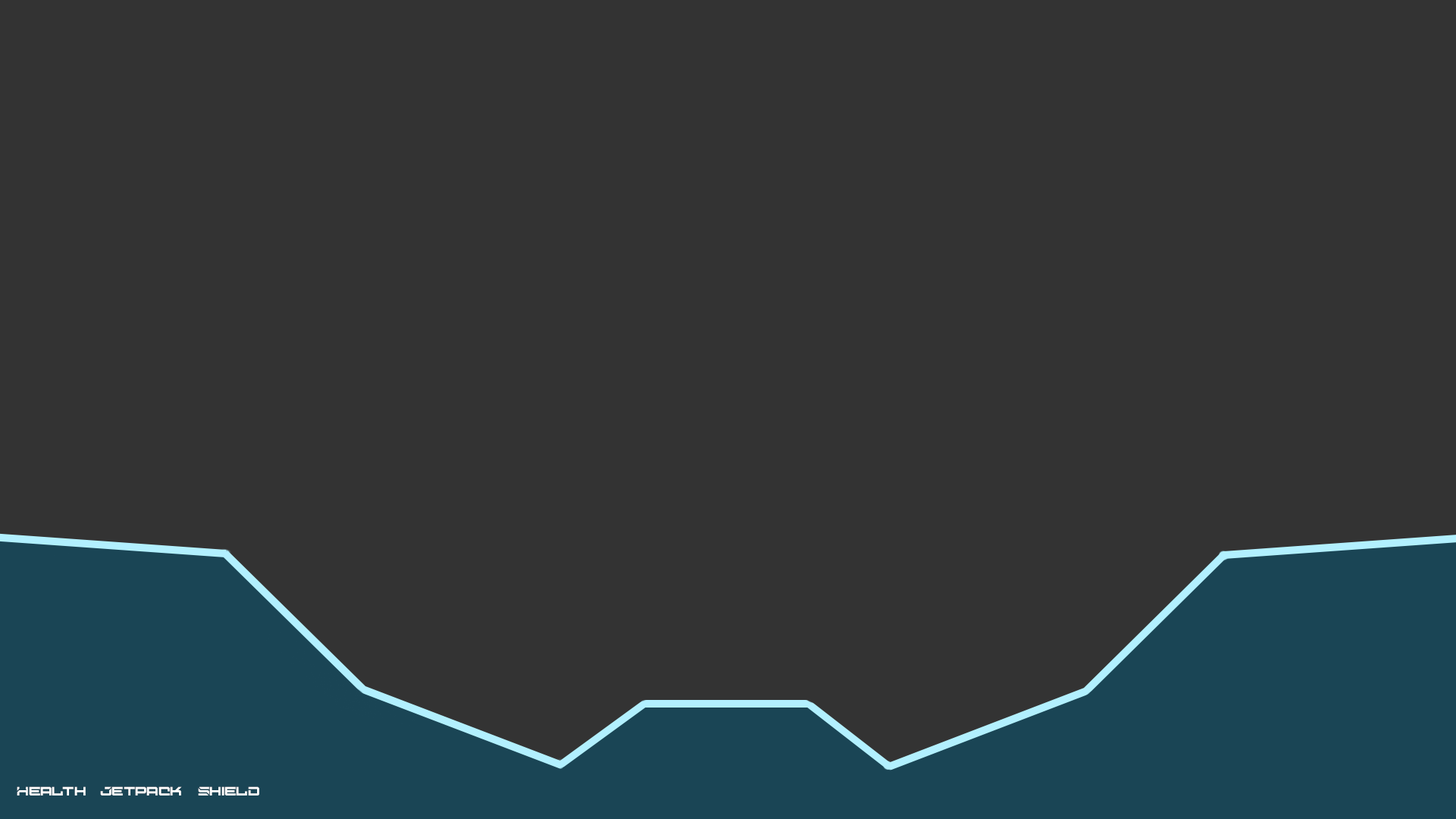
<style>
.page{position:relative;width:1456px;height:819px;background:#333333}
.page>*{position:absolute;margin:0}
.t1{font:10.6px "Digital-Desolation-Plus";color:#ffffff}
</style>
<div class="page">
<p class="t1" style="left:17px;top:786px;width:69px;height:9px">Health</p>
<p class="t1" style="left:100px;top:786px;width:82px;height:9px">Jetpack</p>
<p class="t1" style="left:198px;top:786px;width:61px;height:9px">Shield</p>
</div>
